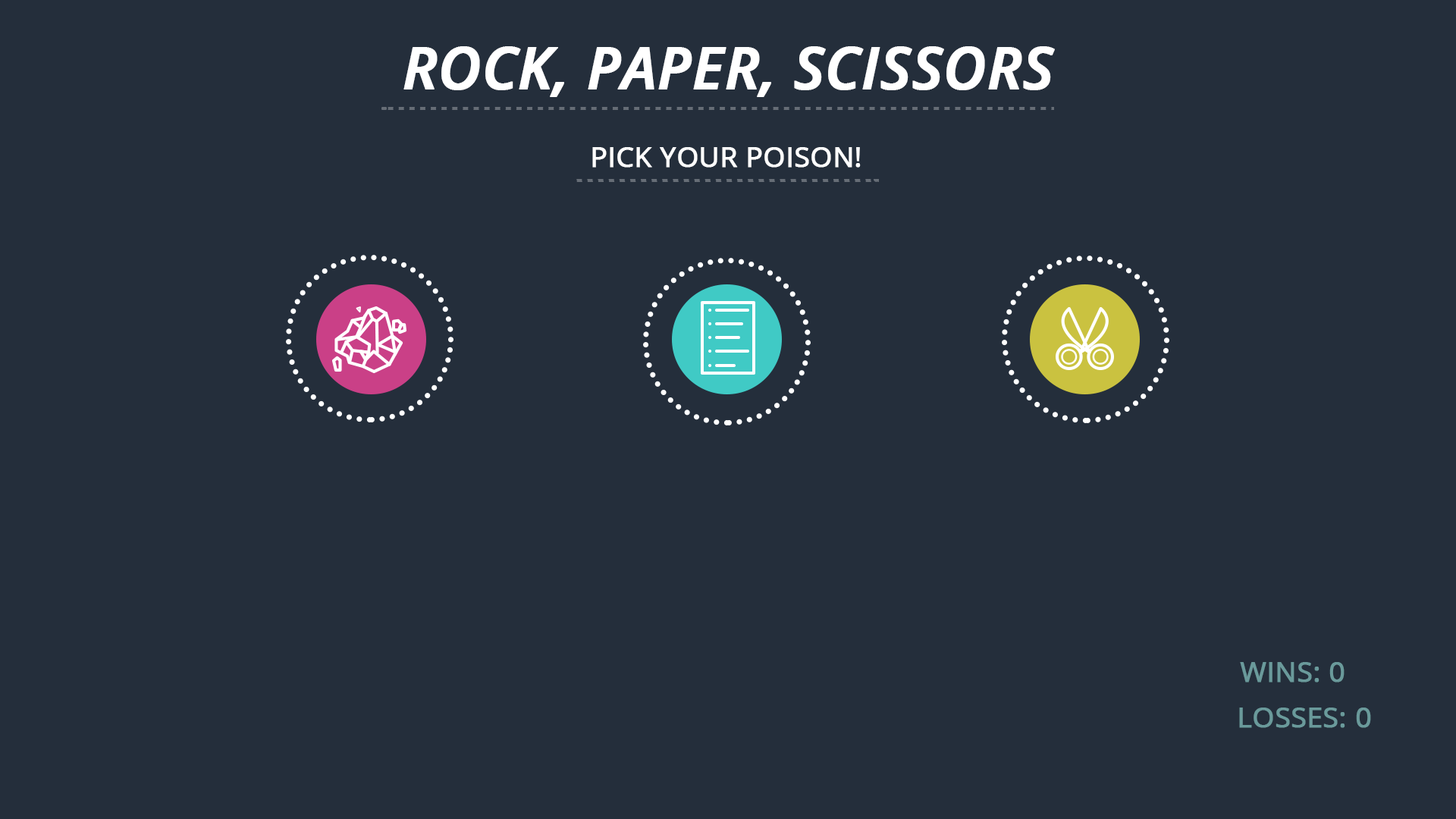
<style>
.page{position:relative;width:1456px;height:819px;background:#242e3b}
.page>*{position:absolute;margin:0}
.t1{font:58.1px "OpenSans-SemiboldItalic";color:#ffffff;font-weight:bold}
.t2{font:27.8px "OpenSans";color:#ffffff;font-weight:bold}
.t3{font:27.8px "OpenSans";color:#6a9a9b;font-weight:bold}
</style>
<div class="page">
<p class="t1" style="left:403px;top:46px;width:652px;height:51px">ROCK, PAPER, SCISSORS</p>
<p class="t2" style="left:592px;top:147px;width:269px;height:21px">PICK YOUR POISON!</p>
<p class="t3" style="left:1240px;top:662px;width:105px;height:20px">WINS: 0</p>
<p class="t3" style="left:1239px;top:708px;width:132px;height:20px">LOSSES: 0</p>
</div>
